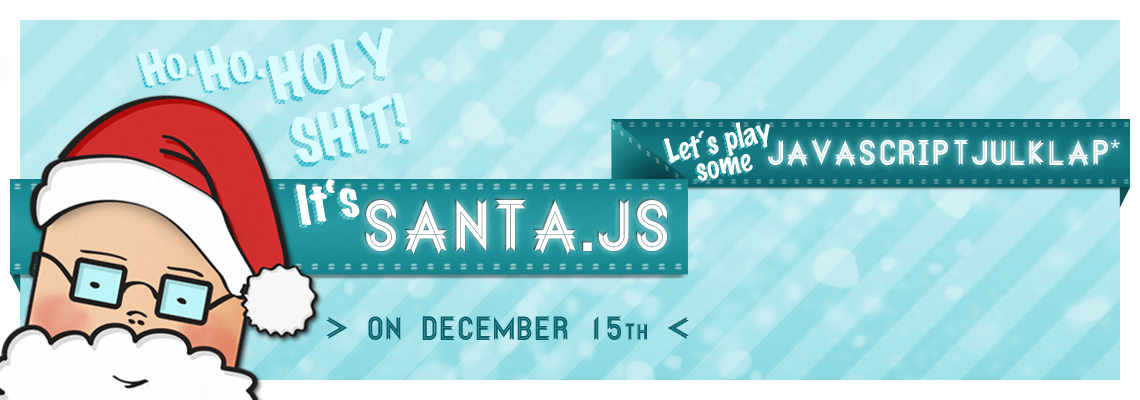
<style>
.page{position:relative;width:1140px;height:400px}
.page>*{position:absolute;margin:0}
.t1{font:55.3px "MarkerFelt-Wide";color:#d9fbff}
.t2{font:41.2px "MarkerFelt-Wide";color:#d9fbff}
.t3{font:51px "MarkerFelt-Wide";color:#d8fbff}
.t4{font:30px/24px "MarkerFelt-Thin"}
.t5{font:30px/24px "MarkerFelt-Thin";color:#ffffff}
.t6{font:32px "Ribbon";color:#feffff}
.t7{font:32px "DroidSans";color:#feffff}
.t8{font:48px "MarkerFelt-Wide"}
.t9{font:48px "MarkerFelt-Wide";color:#ffffff}
.t10{font:65px "Ribbon";color:#ffffff}
.t11{font:30px "Ribbon";color:#09616b}
.t12{font:30px "Ribbon";color:#09616b;font-variant:small-caps}
</style>
<div class="page">
<p class="t1" style="left:268px;top:27px;width:144px;height:136px;text-align:center;rotate:-14deg">HOLY<br>SHIT!</p>
<p class="t2" style="left:138px;top:49px;width:57px;height:37px;rotate:-17deg">Ho.</p>
<p class="t3" style="left:195px;top:45px;width:71px;height:46px;rotate:-16deg">Ho.</p>
<p class="t4" style="left:661px;top:124px;width:107px;height:59px;text-align:center;rotate:-12deg">Let‘s play<br>some</p>
<p class="t4" style="left:661px;top:124px;width:107px;height:59px;text-align:center;rotate:-12deg">Let‘s play<br>some</p>
<p class="t5" style="left:663px;top:122px;width:107px;height:59px;text-align:center;rotate:-12deg">Let‘s play<br>some</p>
<p class="t6" style="left:768px;top:138px;width:352px;height:29px">JavascriptJulklap<span class="t7">*</span></p>
<p class="t8" style="left:293px;top:182px;width:64px;height:46px;rotate:-9deg">It‘s</p>
<p class="t8" style="left:293px;top:182px;width:64px;height:46px;rotate:-9deg">It‘s</p>
<p class="t9" style="left:296px;top:179px;width:64px;height:46px;rotate:-9deg">It‘s</p>
<p class="t10" style="left:365px;top:198px;width:301px;height:55px">Santa.JS</p>
<p class="t10" style="left:366px;top:199px;width:301px;height:55px">Santa.JS</p>
<p class="t10" style="left:367px;top:200px;width:301px;height:55px">Santa.JS</p>
<p class="t11" style="left:326px;top:316px;width:363px;height:25px">&gt; on December 15<span class="t12">th &lt;</span></p>
</div>
